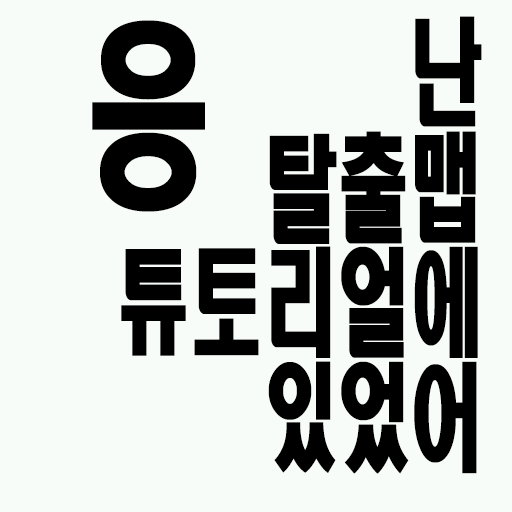
<style>
.page{position:relative;width:512px;height:512px;background:#f8fcf8}
.page>*{position:absolute;margin:0}
.t1{font:115.9px/115px "HeadlineR-HM";color:#000000;scale:0.63 1}
.t2{font:199.5px "HeadlineR-HM";color:#000000;scale:0.63 1}
</style>
<div class="page">
<p class="t1" style="left:121px;top:16px;width:361px;height:458px;text-align:right">난<br>탈출맵<br>튜토리얼에<br>있었어</p>
<p class="t2" style="left:92px;top:20px;width:113px;height:192px">응</p>
</div>
